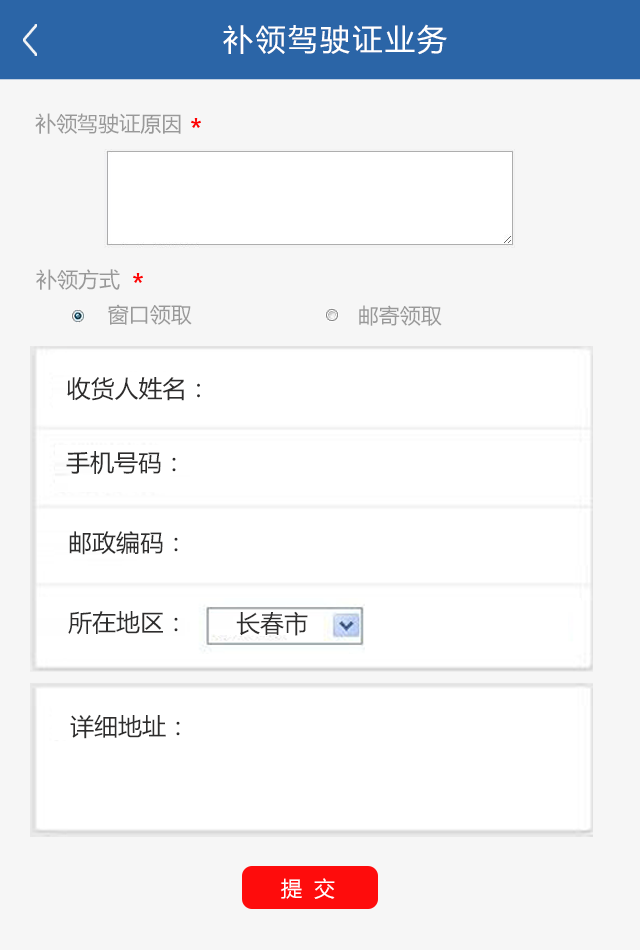
<style>
.page{position:relative;width:640px;height:950px;background:#ffffff}
.page>*{position:absolute;margin:0}
.t1{font:30px "MicrosoftYaHei";letter-spacing:0.08em;color:#ffffff}
.t2{font:21px "MicrosoftYaHei";color:#999999}
.t3{font:24px "MicrosoftYaHei";color:#2e2d2d}
.t4{font:21px "MicrosoftYaHei";letter-spacing:0.14em;color:#ffffff}
</style>
<div class="page">
<p class="t1" style="left:223px;top:24px;width:224px;height:31px">补领驾驶证业务</p>
<p class="t2" style="left:35px;top:113px;width:146px;height:21px">补领驾驶证原因</p>
<p class="t2" style="left:36px;top:269px;width:84px;height:21px">补领方式</p>
<p class="t2" style="left:108px;top:304px;width:84px;height:21px">窗口领取</p>
<p class="t2" style="left:359px;top:305px;width:83px;height:21px">邮寄领取</p>
<p class="t3" style="left:67px;top:377px;width:133px;height:24px">收货人姓名：</p>
<p class="t3" style="left:66px;top:451px;width:110px;height:24px">手机号码：</p>
<p class="t3" style="left:69px;top:531px;width:109px;height:24px">邮政编码：</p>
<p class="t3" style="left:68px;top:611px;width:110px;height:24px">所在地区：</p>
<p class="t3" style="left:236px;top:611px;width:72px;height:25px">长春市</p>
<p class="t3" style="left:70px;top:714px;width:110px;height:25px">详细地址：</p>
<p class="t4" style="left:281px;top:878px;width:54px;height:21px">提 交</p>
</div>
